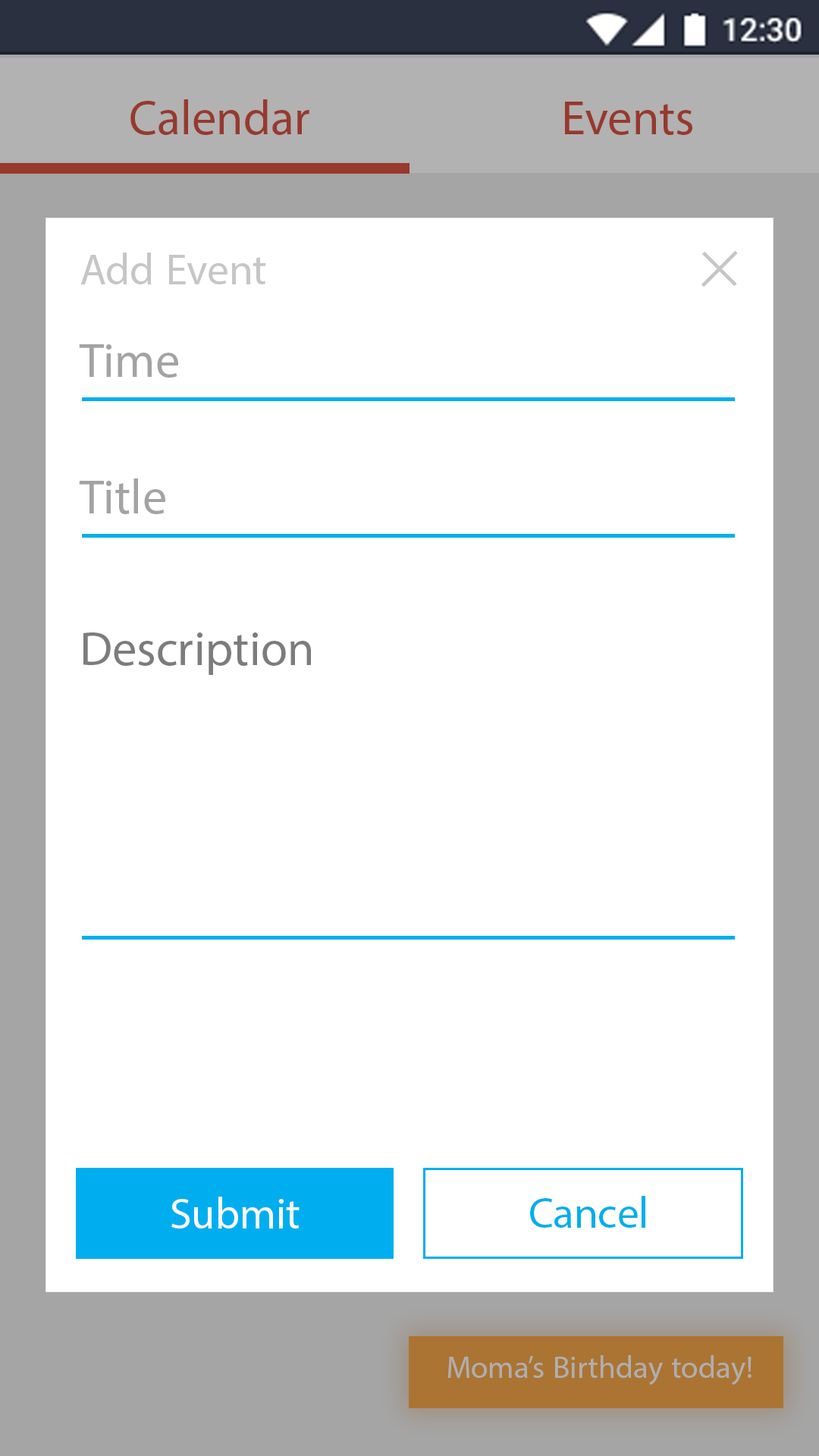
<style>
.page{position:relative;width:819px;height:1456px;background:#ffffff}
.page>*{position:absolute;margin:0}
.t1{font:68.2px "MyriadArabic-Regular";color:#97392d}
.t2{font:60.7px "MyriadArabic-Regular";color:#c6c6c6}
.t3{font:111.5px "BaskOldFace";color:#c6c6c6}
.t4{font:68.2px "MyriadArabic-Regular";color:#a3a3a3}
.t5{font:68.2px "MyriadArabic-Regular";color:#7c7c7c}
.t6{font:60.7px "MyriadArabic-Regular";color:#fffafa}
.t7{font:60.7px "MyriadArabic-Regular";color:#00aeef}
.t8{font:43.8px "MyriadArabic-Regular";color:#afafaf}
</style>
<div class="page">
<p class="t1" style="left:130px;top:99px;width:179px;height:36px">Calendar</p>
<p class="t1" style="left:565px;top:102px;width:127px;height:33px">Events</p>
<p class="t2" style="left:80px;top:253px;width:186px;height:31px">Add Event</p>
<p class="t3" style="left:701px;top:250px;width:37px;height:37px;rotate:-45deg">+</p>
<p class="t4" style="left:79px;top:344px;width:99px;height:34px">Time</p>
<p class="t4" style="left:79px;top:479px;width:86px;height:35px">Title</p>
<p class="t5" style="left:83px;top:632px;width:228px;height:43px">Description</p>
<p class="t6" style="left:171px;top:1197px;width:129px;height:31px">Submit</p>
<p class="t7" style="left:530px;top:1196px;width:115px;height:32px">Cancel</p>
<p class="t8" style="left:447px;top:1355px;width:304px;height:30px">Moma’s Birthday today!</p>
</div>
